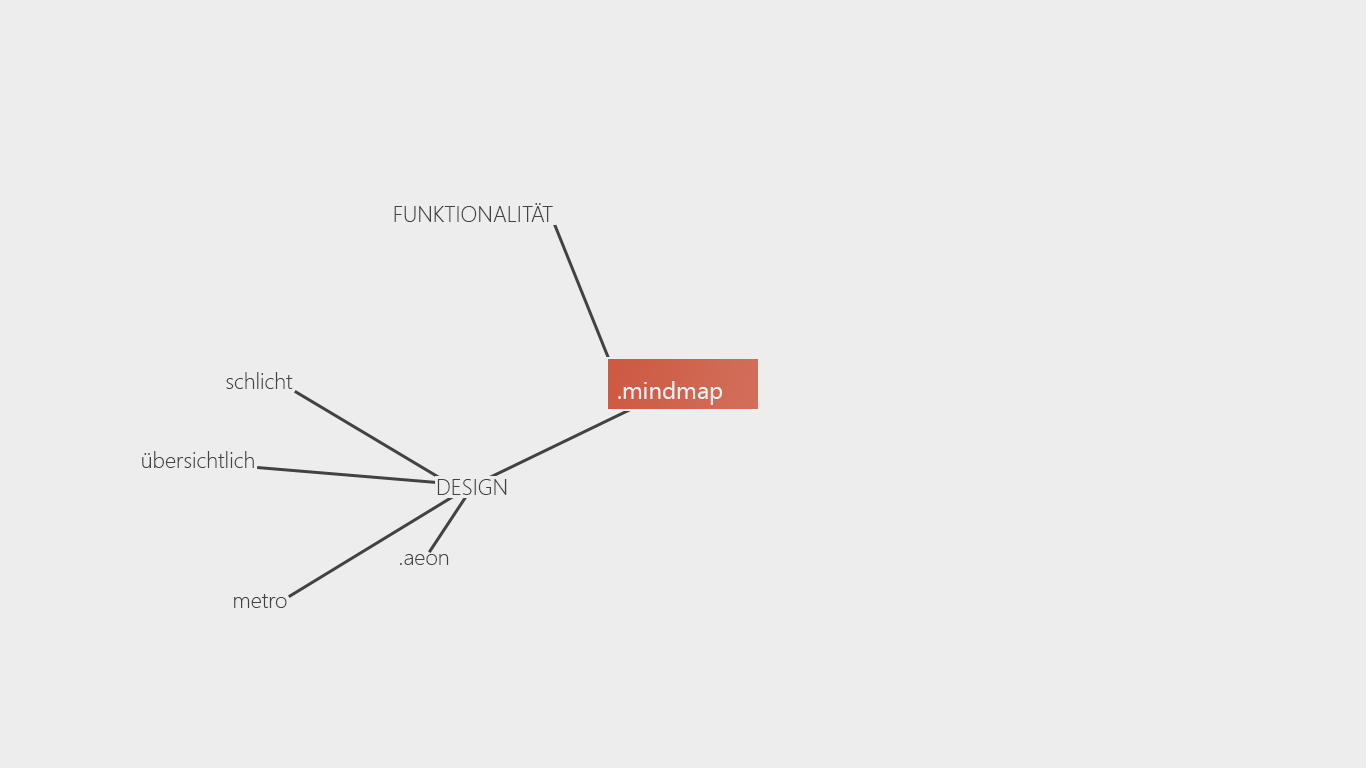
<style>
.page{position:relative;width:1366px;height:768px;background:#ededed}
.page>*{position:absolute;margin:0}
.t1{font:22px "SegoeUI-Light";color:#424242}
.t2{font:24px "SegoeUI";color:#f2f2f2}
</style>
<div class="page">
<p class="t1" style="left:394px;top:203px;width:159px;height:19px">FUNKTIONALITÄT</p>
<p class="t1" style="left:226px;top:372px;width:67px;height:17px">schlicht</p>
<p class="t2" style="left:618px;top:381px;width:105px;height:24px">.mindmap</p>
<p class="t1" style="left:142px;top:451px;width:112px;height:17px">übersichtlich</p>
<p class="t1" style="left:437px;top:479px;width:70px;height:16px">DESIGN</p>
<p class="t1" style="left:400px;top:554px;width:49px;height:11px">.aeon</p>
<p class="t1" style="left:234px;top:594px;width:53px;height:14px">metro</p>
</div>
